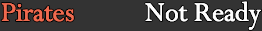
<style>
.page{position:relative;width:262px;height:31px;background:#333333}
.page>*{position:absolute;margin:0}
.t1{font:30px "Perpetua";color:#fefefe}
.t2{font:30px "Perpetua";color:#f06a4f}
</style>
<div class="page">
<p class="t1" style="left:1px;top:1px;width:260px;height:29px"><span class="t2">Pirates  </span>Not Ready</p>
</div>
